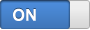
<style>
.page{position:relative;width:90px;height:30px}
.page>*{position:absolute;margin:0}
.t1{font:16.3px "Helvetica-Bold";color:#ffffff}
</style>
<div class="page">
<p class="t1" style="left:13px;top:8px;width:23px;height:13px">ON</p>
</div>
